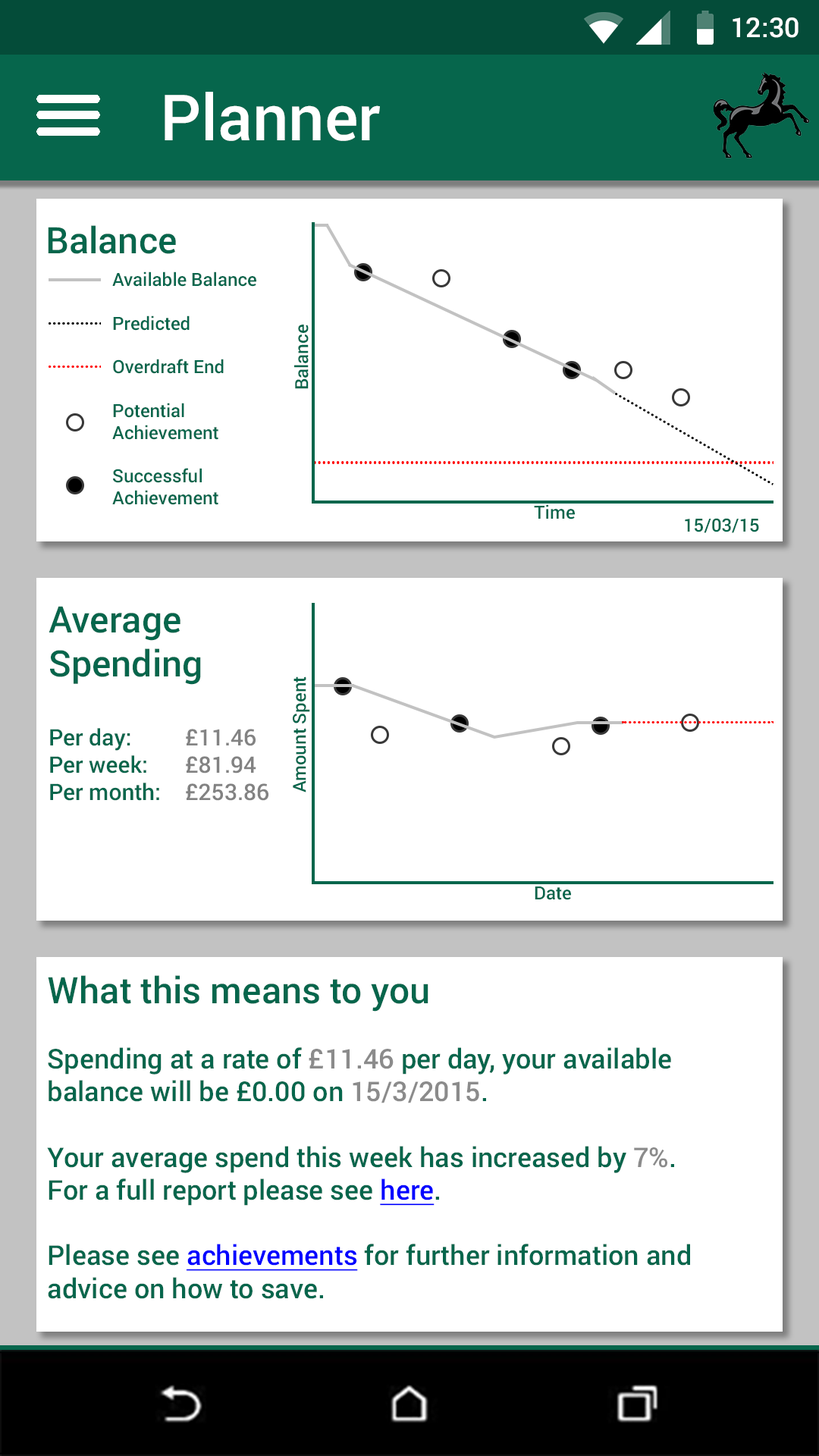
<style>
.page{position:relative;width:819px;height:1456px;background:#ffffff}
.page>*{position:absolute;margin:0}
.t1{font:27.3px "Roboto-Medium";color:#ffffff}
.t2{font:63.7px "Roboto-Medium";color:#ffffff}
.t3{font:36.4px "Roboto-Medium";color:#06664c}
.t4{font:18.2px "Roboto-Medium";color:#06664c}
.t5{font:22.7px "Roboto-Medium";color:#06664c}
.t6{font:22.7px "Roboto-Medium";color:#838383}
.t7{font:22.7px "Roboto-Medium";color:#828282}
.t8{font:27.3px "Roboto-Medium";color:#06664c}
.t9{font:27.3px "Roboto-Medium";color:#8b8b8b}
.t10{font:27.3px "Roboto-Medium";color:#0000ff;text-decoration:underline}
</style>
<div class="page">
<p class="t1" style="left:733px;top:17px;width:66px;height:21px">12:30</p>
<p class="t2" style="left:165px;top:92px;width:215px;height:49px">Planner</p>
<p class="t3" style="left:48px;top:225px;width:128px;height:29px">Balance</p>
<p class="t4" style="left:112px;top:271px;width:144px;height:234px">Available Balance<br><br>Predicted<br><br>Overdraft End<br><br>Potential<br>Achievement<br><br>Successful<br>Achievement</p>
<p class="t4" style="left:294px;top:325px;width:15px;height:64px;rotate:-90deg">Balance</p>
<p class="t4" style="left:534px;top:504px;width:41px;height:15px">Time</p>
<p class="t4" style="left:685px;top:518px;width:74px;height:15px">15/03/15</p>
<p class="t3" style="left:49px;top:606px;width:152px;height:79px">Average <br>Spending</p>
<p class="t4" style="left:293px;top:676px;width:17px;height:116px;rotate:-90deg">Amount Spent</p>
<p class="t5" style="left:50px;top:728px;width:218px;height:73px">Per day:   <span class="t6">£11.46<br></span>Per week:   <span class="t7">£81.94<br></span>Per month:  <span class="t7">£253.86</span></p>
<p class="t4" style="left:535px;top:886px;width:36px;height:14px">Date</p>
<p class="t8" style="left:47px;top:975px;width:643px;height:324px"><span class="t3">What this means to you</span><br><br>Spending at a rate of <span class="t9">£11.46</span> per day, your available <br>balance will be £0.00 on <span class="t9">15/3/2015</span>.<br><br>Your average spend this week has increased by <span class="t9">7%</span>.<br>For a full report please see <span class="t10">here</span>.<br><br>Please see <span class="t10">achievements</span> for further information and advice on how to save.</p>
</div>
